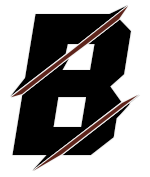
<style>
.page{position:relative;width:150px;height:177px;background:#ffffff}
.page>*{position:absolute;margin:0}
.t1{font:201.2px "MX-Regular";color:#000000;scale:0.85 1}
</style>
<div class="page">
<p class="t1" style="left:10px;top:5px;width:130px;height:166px">B</p>
</div>
